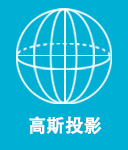
<style>
.page{position:relative;width:128px;height:150px;background:#00afd4}
.page>*{position:absolute;margin:0}
.t1{font:18px "AdobeHeitiStd-Regular";letter-spacing:-0.005em;color:#ffffff;font-weight:bold}
</style>
<div class="page">
<p class="t1" style="left:29px;top:116px;width:73px;height:19px">高斯投影</p>
</div>
